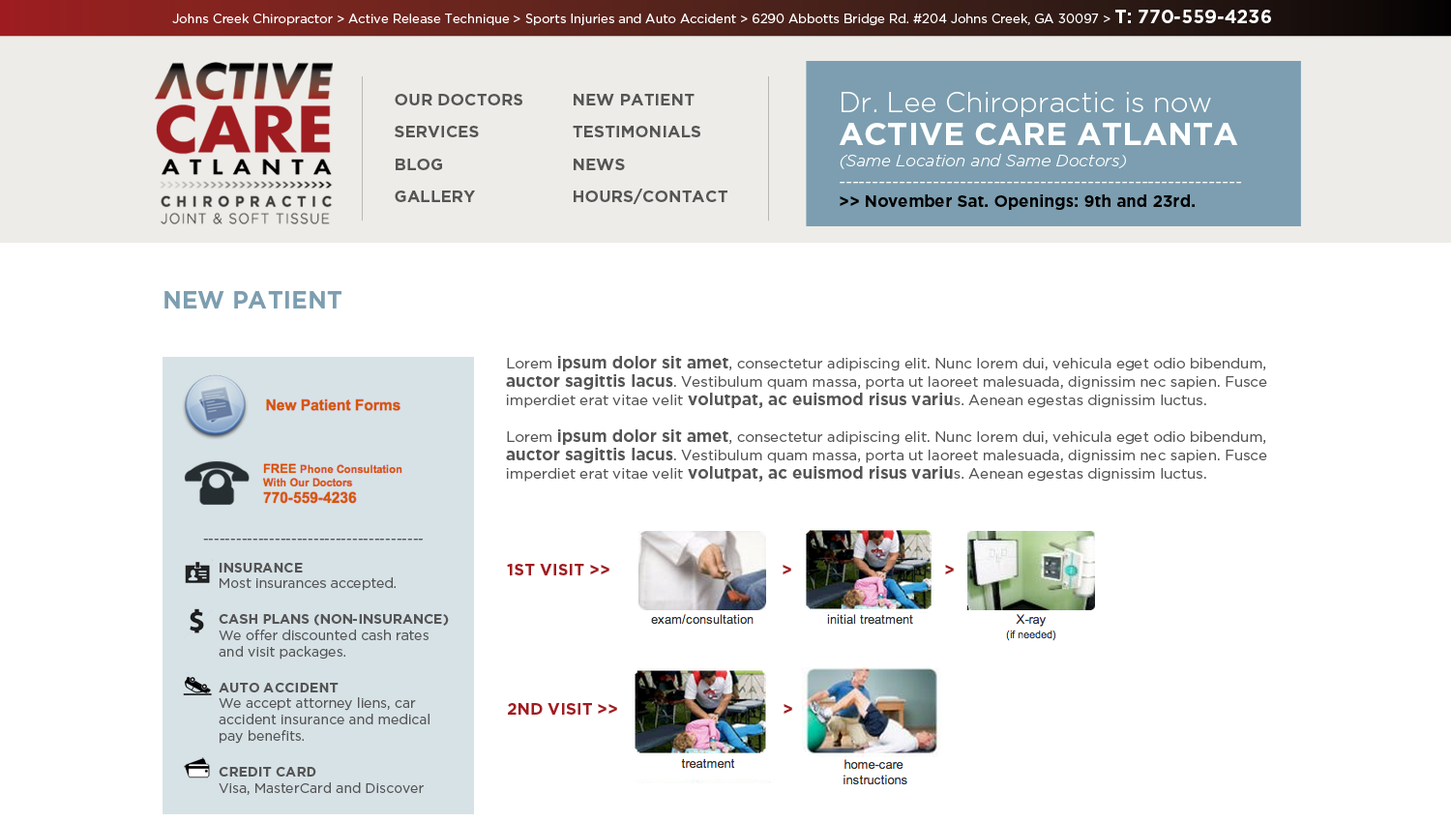
<style>
.page{position:relative;width:1451px;height:822px;background:#ffffff}
.page>*{position:absolute;margin:0}
.t1{font:12.6px "GothamHTF-Book";color:#ffffff}
.t2{font:18.4px "GothamHTF-Bold";color:#ffffff}
.t3{font:16.4px "GothamHTF-Bold";color:#555555}
.t4{font:16.4px/21.3px "GothamHTF-LightItalic";color:#ffffff}
.t5{font:28px/28.9px "GothamHTF-Light";color:#ffffff}
.t6{font:31.9px/32.9px "GothamHTF-Bold";color:#ffffff}
.t7{font:16.4px/19.3px "GothamHTF-Bold";color:#000000}
.t8{font:24.2px "GothamHTF-Bold";color:#7c9eb0}
.t9{font:14.5px/18.4px "GothamHTF-Book";color:#555555}
.t10{font:16.4px/18.4px "GothamHTF-Bold";color:#555555}
.t11{font:13.5px "GothamHTF-Book";color:#555555}
.t12{font:13.5px "GothamHTF-Bold";color:#555555}
.t13{font:16.4px "GothamHTF-Bold";color:#9f1c20}
</style>
<div class="page">
<p class="t1" style="left:172px;top:10px;width:1099px;height:16px">Johns Creek Chiropractor &gt; Active Release Technique &gt; Sports Injuries and Auto Accident &gt; 6290 Abbotts Bridge Rd. #204 Johns Creek, GA 30097 &gt; <span class="t2">T: 770-559-4236</span></p>
<p class="t3" style="left:395px;top:94px;width:127px;height:11px">OUR DOCTORS</p>
<p class="t3" style="left:573px;top:94px;width:121px;height:11px">NEW PATIENT</p>
<p class="t4" style="left:838px;top:92px;width:404px;height:118px"><span class="t5">Dr. Lee Chiropractic is now <br></span><span class="t6">ACTIVE CARE ATLANTA<br></span>(Same Location and Same Doctors)<br>------------------------------------------------------------<br><span class="t7">&gt;&gt; November Sat. Openings: 9th and 23rd.</span></p>
<p class="t3" style="left:395px;top:126px;width:84px;height:11px">SERVICES</p>
<p class="t3" style="left:573px;top:126px;width:127px;height:11px">TESTIMONIALS</p>
<p class="t3" style="left:396px;top:159px;width:46px;height:11px">BLOG</p>
<p class="t3" style="left:573px;top:159px;width:52px;height:11px">NEWS</p>
<p class="t3" style="left:395px;top:191px;width:80px;height:11px">GALLERY</p>
<p class="t3" style="left:573px;top:189px;width:154px;height:15px">HOURS/CONTACT</p>
<p class="t8" style="left:164px;top:291px;width:177px;height:17px">NEW PATIENT</p>
<p class="t9" style="left:506px;top:356px;width:761px;height:126px">Lorem <span class="t10">ipsum dolor sit amet</span>, consectetur adipiscing elit. Nunc lorem dui, vehicula eget odio bibendum, <span class="t10">auctor sagittis lacus</span>. Vestibulum quam massa, porta ut laoreet malesuada, dignissim nec sapien. Fusce imperdiet erat vitae velit<span class="t10"> volutpat, ac euismod risus variu</span>s. Aenean egestas dignissim luctus. <br><br>Lorem <span class="t10">ipsum dolor sit amet</span>, consectetur adipiscing elit. Nunc lorem dui, vehicula eget odio bibendum, <span class="t10">auctor sagittis lacus</span>. Vestibulum quam massa, porta ut laoreet malesuada, dignissim nec sapien. Fusce imperdiet erat vitae velit<span class="t10"> volutpat, ac euismod risus variu</span>s. Aenean egestas dignissim luctus.</p>
<p class="t11" style="left:203px;top:539px;width:220px;height:2px">----------------------------------------</p>
<p class="t11" style="left:219px;top:563px;width:230px;height:232px"><span class="t12">INSURANCE<br></span>Most insurances accepted.<br><br><span class="t12">CASH PLANS (NON-INSURANCE)<br></span>We offer discounted cash rates and visit packages. <br><br><span class="t12">AUTO ACCIDENT <br></span>We accept attorney liens, car <br>accident insurance and medical pay benefits.<br><br><span class="t12">CREDIT CARD <br></span>Visa, MasterCard and Discover</p>
<p class="t13" style="left:507px;top:564px;width:102px;height:11px">1ST VISIT &gt;&gt;</p>
<p class="t13" style="left:782px;top:565px;width:9px;height:9px">&gt;</p>
<p class="t13" style="left:945px;top:565px;width:9px;height:9px">&gt;</p>
<p class="t13" style="left:508px;top:703px;width:109px;height:12px">2ND VISIT &gt;&gt;</p>
<p class="t13" style="left:783px;top:704px;width:9px;height:10px">&gt;</p>
</div>
